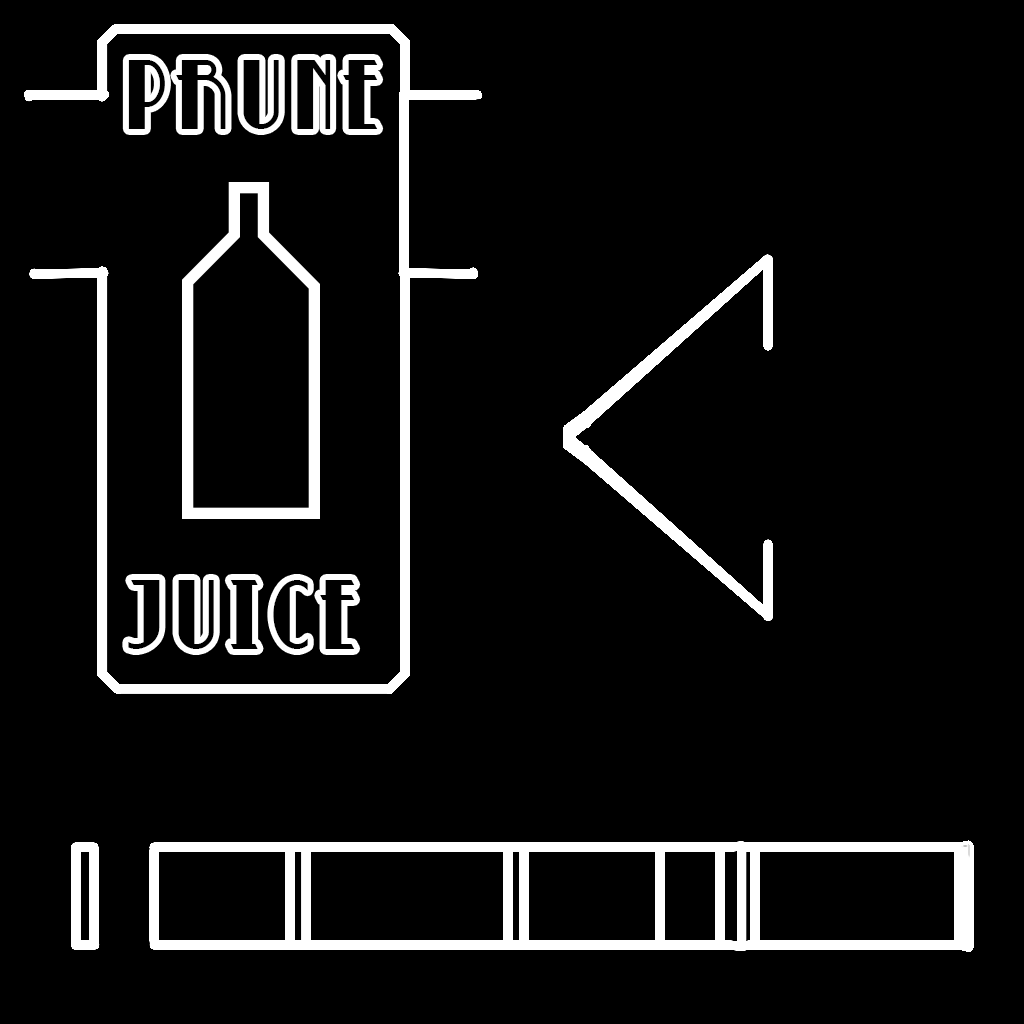
<style>
.page{position:relative;width:1024px;height:1024px;background:#000000}
.page>*{position:absolute;margin:0}
.t1{font:86.4px "BettyNoir";letter-spacing:0.1em;color:#010101}
.t2{font:86.4px "BettyNoir";letter-spacing:0.1em;color:#000000}
</style>
<div class="page">
<p class="t1" style="left:128px;top:60px;width:250px;height:69px">PRUNE</p>
<p class="t2" style="left:128px;top:580px;width:227px;height:69px">JUICE</p>
</div>
